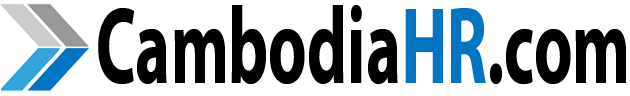
<style>
.page{position:relative;width:630px;height:96px;background:#ffffff}
.page>*{position:absolute;margin:0}
.t1{font:110.4px "MyriadPro-Bold";color:#000000;scale:0.61 1}
.t2{font:110.4px "MyriadPro-Bold";color:#0174c3;scale:0.61 1}
</style>
<div class="page">
<p class="t1" style="left:98px;top:5px;width:528px;height:80px">Cambodia<span class="t2">HR</span>.com</p>
</div>
